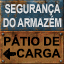
<style>
.page{position:relative;width:64px;height:64px}
.page>*{position:absolute;margin:0}
.t1{font:12px/13.3px "Arial-BoldMT";letter-spacing:-0.04em;color:#e0e0e0;text-transform:uppercase;scale:0.76 1}
.t2{font:12px/12px "Arial-BoldMT";color:#000000;text-transform:uppercase}
</style>
<div class="page">
<p class="t1" style="left:3px;top:4px;width:59px;height:24px;text-align:center">Segurança<br>do armazém</p>
<p class="t2" style="left:4px;top:34px;width:57px;height:24px;text-align:right">Pátio de<br>carga</p>
</div>
